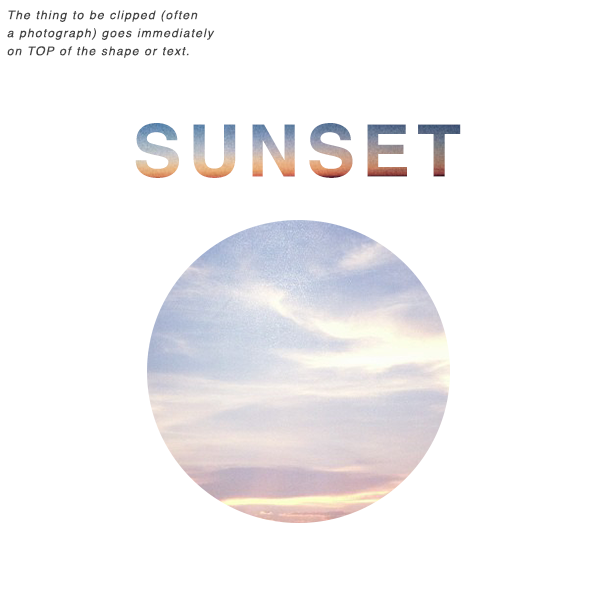
<style>
.page{position:relative;width:600px;height:600px;background:#ffffff}
.page>*{position:absolute;margin:0}
.t1{font:12px/18px "Helvetica-Oblique";letter-spacing:0.1em;color:#444444}
.t2{font:72px "Helvetica-Bold";letter-spacing:0.1em}
</style>
<div class="page">
<p class="t1" style="left:7px;top:10px;width:208px;height:48px">The thing to be clipped (often<br>a photograph) goes immediately<br>on TOP of the shape or text.</p>
<p class="t2" style="left:135px;top:123px;width:326px;height:55px">SUNSET</p>
</div>
